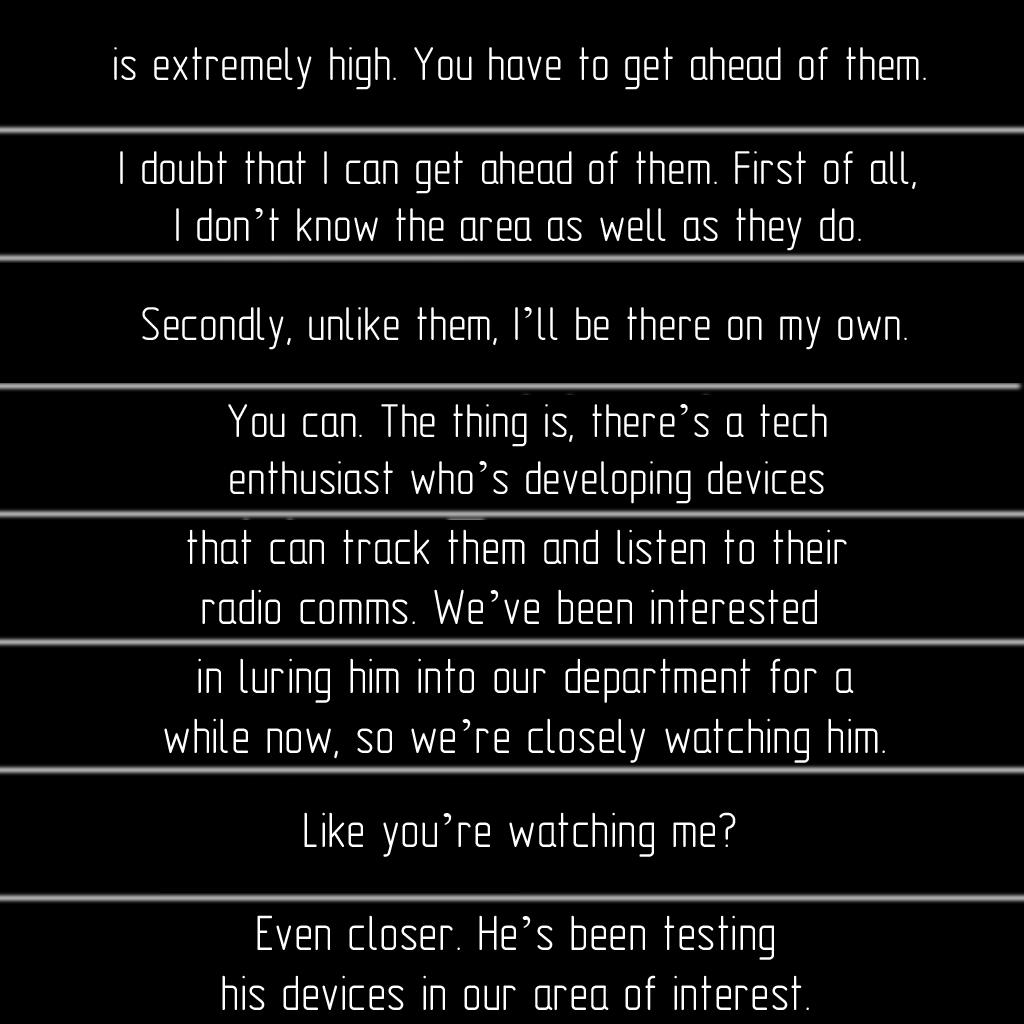
<style>
.page{position:relative;width:1024px;height:1024px;background:#000000}
.page>*{position:absolute;margin:0}
.t1{font:48px "GOST-2.304-81typeA";color:#ffffff}
.t2{font:48px "TimesNewRomanPSMT";color:#ffffff}
.t3{font:50px "GOST-2.304-81typeA";color:#ffffff}
.t4{font:50px "TimesNewRomanPSMT";color:#ffffff}
</style>
<div class="page">
<p class="t1" style="left:114px;top:47px;width:812px;height:43px">is extremely high. You have to get ahead of them.</p>
<p class="t1" style="left:120px;top:151px;width:796px;height:100px;text-align:center">I doubt that I can get ahead of them. First of all,<br>I don<span class="t2">’</span>t know the area as well as they do.</p>
<p class="t1" style="left:142px;top:307px;width:765px;height:43px">Secondly, unlike them, I<span class="t2">’</span>ll be there on my own.</p>
<p class="t1" style="left:228px;top:404px;width:599px;height:100px;text-align:center">You can. The thing is, there<span class="t2">’</span>s a tech<br>enthusiast who<span class="t2">’</span>s developing devices</p>
<p class="t3" style="left:187px;top:529px;width:660px;height:95px;text-align:center">that can track them and listen to their<br>radio comms. We<span class="t4">’</span>ve been interested</p>
<p class="t3" style="left:164px;top:658px;width:721px;height:105px;text-align:center">in luring him into our department for a<br>while now, so we<span class="t4">’</span>re closely watching him.</p>
<p class="t3" style="left:304px;top:812px;width:432px;height:45px">Like you<span class="t4">’</span>re watching me?</p>
<p class="t3" style="left:222px;top:915px;width:587px;height:95px;text-align:center">Even closer. He<span class="t4">’</span>s been testing<br>his devices in our area of interest.</p>
</div>
